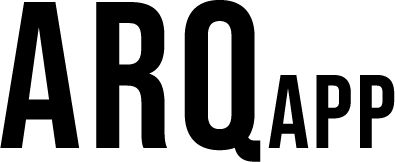
<style>
.page{position:relative;width:395px;height:162px;background:#ffffff}
.page>*{position:absolute;margin:0}
.t1{font:208.4px "BebasNeue-Regular";letter-spacing:0.03em;color:#000000}
.t2{font:104.2px "BebasNeue-Regular";letter-spacing:0.03em;color:#000000}
</style>
<div class="page">
<p class="t1" style="left:0px;top:0px;width:395px;height:162px">ARQ<span class="t2">app</span></p>
</div>
